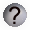
<style>
.page{position:relative;width:30px;height:30px}
.page>*{position:absolute;margin:0}
.t1{font:24px "ArialMT";color:#0e0101}
</style>
<div class="page">
<p class="t1" style="left:9px;top:6px;width:12px;height:18px">?</p>
</div>
